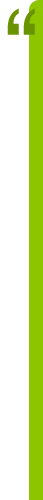
<style>
.page{position:relative;width:43px;height:500px;background:#ffffff}
.page>*{position:absolute;margin:0}
.t1{font:84.4px "GenevaCY";color:#699300}
</style>
<div class="page">
<p class="t1" style="left:7px;top:8px;width:28px;height:27px">“</p>
</div>
